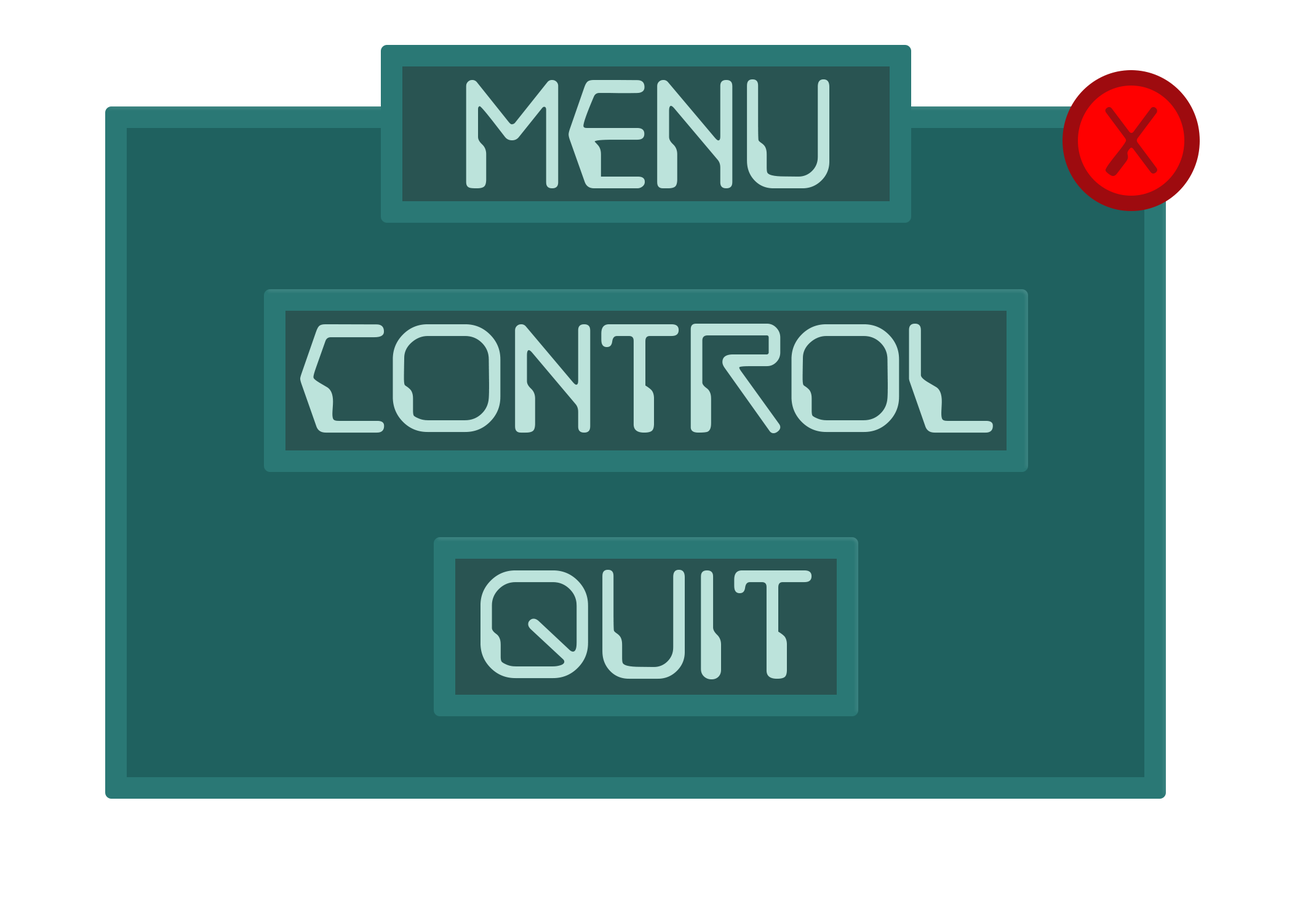
<style>
.page{position:relative;width:1292px;height:923px;background:#ffffff}
.page>*{position:absolute;margin:0}
.t1{font:153.8px "DestructoBeamBB";color:#bce3db}
.t2{font:92.3px "DestructoBeamBB";color:#9e0b0f}
</style>
<div class="page">
<p class="t1" style="left:466px;top:79px;width:363px;height:109px">Menu</p>
<p class="t2" style="left:1105px;top:107px;width:52px;height:69px">x</p>
<p class="t1" style="left:300px;top:324px;width:693px;height:109px">Control</p>
<p class="t1" style="left:481px;top:570px;width:331px;height:109px">quit</p>
</div>
